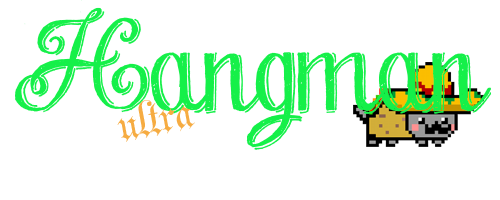
<style>
.page{position:relative;width:500px;height:200px;background:#ffffff}
.page>*{position:absolute;margin:0}
.t1{font:116.7px "Chalk-hand-lettering-shaded_demo";color:#16f049}
.t2{font:84.7px "Parchment-Regular";color:#f6ac43}
</style>
<div class="page">
<p class="t1" style="left:15px;top:0px;width:476px;height:150px">Hangman</p>
<p class="t2" style="left:117px;top:100px;width:78px;height:42px">ultra</p>
</div>
